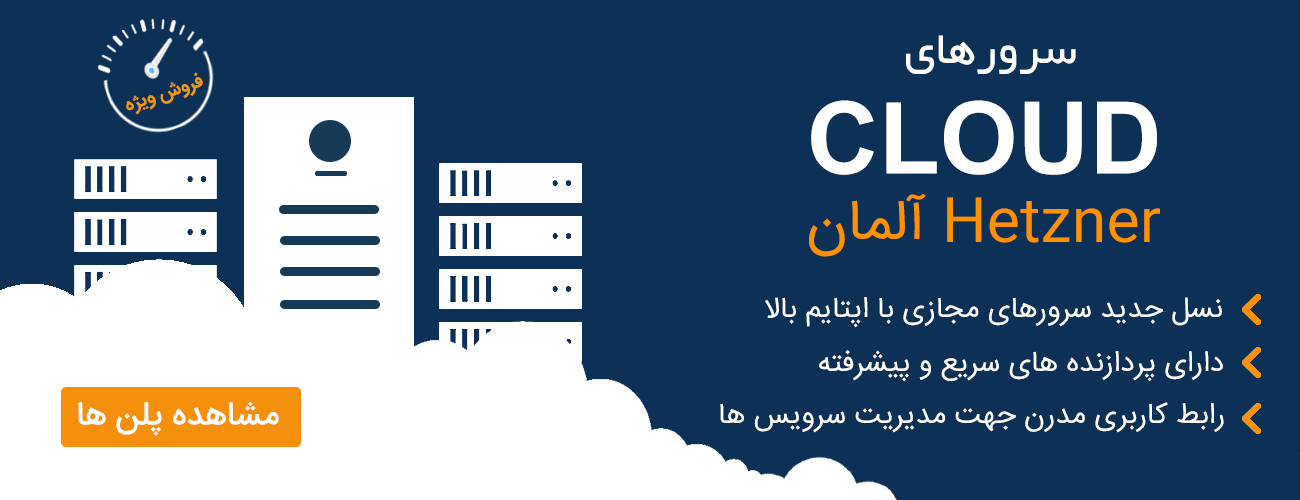
<style>
.page{position:relative;width:1300px;height:500px;background:#0d3156}
.page>*{position:absolute;margin:0}
.t1{font:50px "BYekan";color:#ffffff}
.t2{font:19.1px "IRANSans-Bold";color:#ef970d}
.t3{font:100px "Arial-BoldMT";color:#ffffff}
.t4{font:58.3px "IRANSans";color:#ff9000}
.t5{font:29.2px "IRANSans";color:#ffffff}
.t6{font:33.3px "IRANSans-Medium";color:#ffffff}
</style>
<div class="page">
<p class="t1" style="left:906px;top:35px;width:170px;height:39px">سرورهای</p>
<p class="t2" style="left:126px;top:72px;width:77px;height:43px;rotate:-19deg">فروش ویژه</p>
<p class="t3" style="left:811px;top:100px;width:346px;height:75px">CLOUD</p>
<p class="t4" style="left:809px;top:193px;width:351px;height:64px">Hetzner آلمان</p>
<p class="t5" style="left:765px;top:297px;width:457px;height:31px">نسل جدید سرورهای مجازی با اپتایم بالا</p>
<p class="t5" style="left:819px;top:350px;width:404px;height:32px">دارای پردازنده های سریع و پیشرفته</p>
<p class="t6" style="left:78px;top:401px;width:201px;height:35px">مشاهده پلن ها</p>
<p class="t5" style="left:720px;top:402px;width:504px;height:31px">رابط کاربری مدرن جهت مدیریت سرویس ها</p>
</div>
